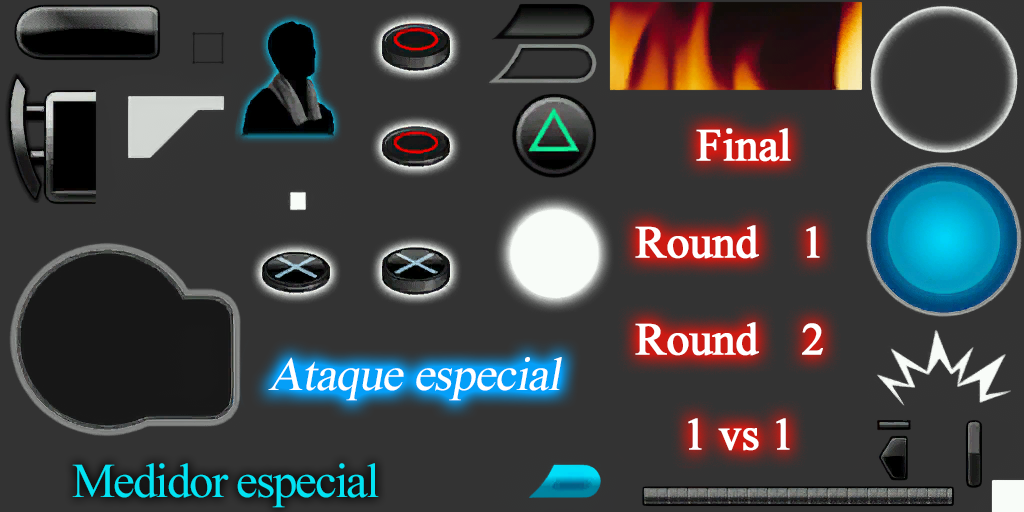
<style>
.page{position:relative;width:1024px;height:512px;background:#333333}
.page>*{position:absolute;margin:0}
.t1{font:45.6px "TimesNewRomanPSMT";letter-spacing:-0.02em;color:#ffffff;font-weight:bold}
.t2{font:45.6px "TimesNewRomanPSMT";letter-spacing:-0.24em;color:#ffffff;font-weight:bold}
.t3{font:47.5px "TimesNewRomanPSMT";letter-spacing:-0.02em;color:#ffffff;font-style:italic}
.t4{font:48.4px "TimesNewRomanPSMT";letter-spacing:-0.04em;color:#02e3f3}
</style>
<div class="page">
<p class="t1" style="left:696px;top:128px;width:95px;height:34px">Final</p>
<p class="t1" style="left:635px;top:225px;width:185px;height:34px">Round   <span class="t2">1</span></p>
<p class="t1" style="left:635px;top:322px;width:188px;height:34px">Round   <span class="t2">2</span></p>
<p class="t3" style="left:268px;top:357px;width:294px;height:44px">Ataque especial</p>
<p class="t1" style="left:688px;top:418px;width:102px;height:33px">1 vs 1</p>
<p class="t4" style="left:72px;top:463px;width:307px;height:45px">Medidor especial</p>
</div>
